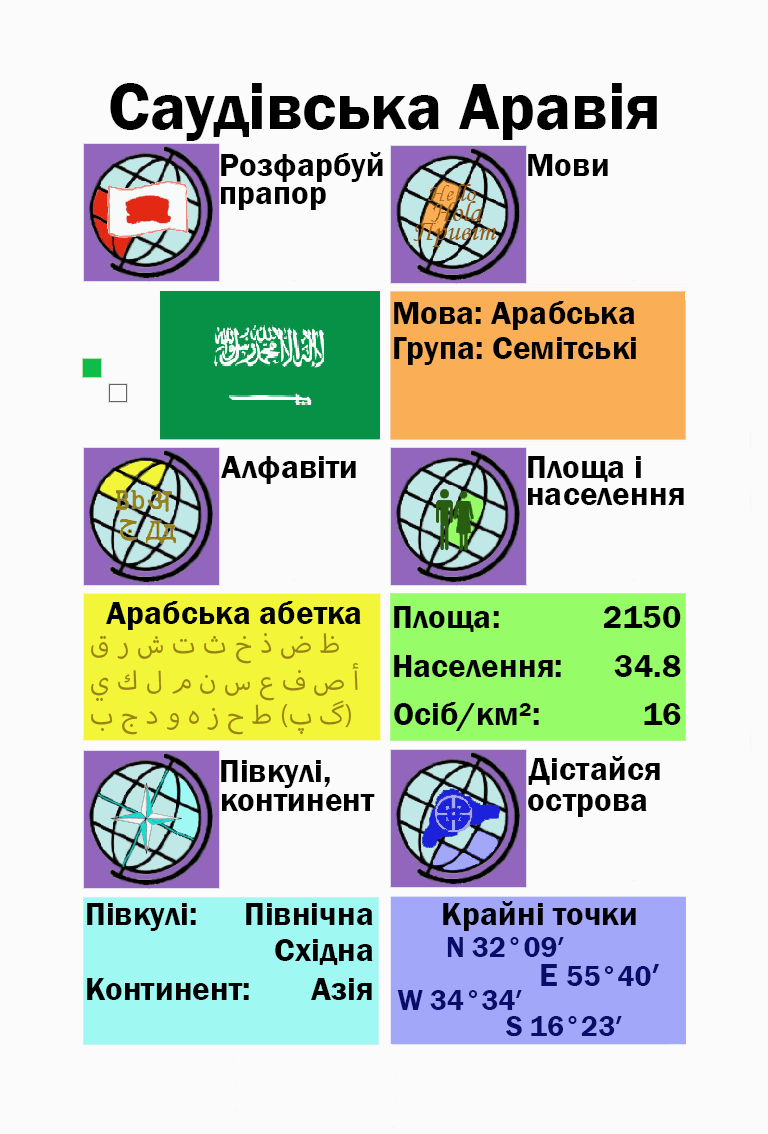
<style>
.page{position:relative;width:768px;height:1134px;background:#fbfbfb}
.page>*{position:absolute;margin:0}
.t1{font:66.7px "FranklinGothic-Demi";color:#000000}
.t2{font:33.3px "FranklinGothic-Demi";color:#000000}
.t3{font:33.3px "FranklinGothic-Demi";color:#000003}
.t4{font:37.5px "MyriadArabic-Regular";color:#988413}
.t5{font:29.2px "FranklinGothic-Demi";color:#988413}
.t6{font:29.2px "FranklinGothic-Demi";color:#090c69}
.t7{font:33.3px "FranklinGothic-Demi";color:#090c69}
</style>
<div class="page">
<p class="t1" style="left:110px;top:83px;width:547px;height:58px">Саудівська Аравія</p>
<p class="t2" style="left:221px;top:152px;width:162px;height:30px">Розфарбуй</p>
<p class="t2" style="left:528px;top:154px;width:80px;height:22px">Мови</p>
<p class="t2" style="left:221px;top:187px;width:105px;height:23px">прапор</p>
<p class="t2" style="left:394px;top:301px;width:241px;height:29px">Мова: Арабська</p>
<p class="t2" style="left:394px;top:337px;width:242px;height:28px">Група: Семітські</p>
<p class="t2" style="left:221px;top:456px;width:135px;height:28px">Алфавіти</p>
<p class="t2" style="left:528px;top:456px;width:113px;height:26px">Площа і</p>
<p class="t2" style="left:528px;top:488px;width:156px;height:17px">населення</p>
<p class="t2" style="left:106px;top:601px;width:255px;height:29px">Арабська абетка</p>
<p class="t2" style="left:394px;top:606px;width:105px;height:26px">Площа:</p>
<p class="t3" style="left:604px;top:606px;width:77px;height:22px">2150</p>
<p class="t4" style="left:91px;top:633px;width:248px;height:31px"><span class="t5"><br></span>ق ر ش ت ث خ ذ ض ظ</p>
<p class="t4" style="left:91px;top:663px;width:268px;height:38px">ي ك ل م ن س ع ف ص أ</p>
<p class="t2" style="left:394px;top:655px;width:167px;height:22px">Населення:</p>
<p class="t2" style="left:614px;top:655px;width:67px;height:22px">34.8</p>
<p class="t4" style="left:91px;top:700px;width:260px;height:35px">ب ج د و ه ز ح ط (پ گ)</p>
<p class="t2" style="left:394px;top:702px;width:145px;height:29px">Осіб/км²:</p>
<p class="t2" style="left:644px;top:703px;width:37px;height:22px">16</p>
<p class="t2" style="left:221px;top:760px;width:109px;height:28px">Півкулі,</p>
<p class="t2" style="left:528px;top:756px;width:132px;height:29px">Дістайся</p>
<p class="t2" style="left:222px;top:794px;width:153px;height:17px">континент</p>
<p class="t2" style="left:528px;top:794px;width:119px;height:23px">острова</p>
<p class="t2" style="left:87px;top:903px;width:109px;height:28px">Півкулі:</p>
<p class="t2" style="left:246px;top:903px;width:127px;height:22px">Північна</p>
<p class="t3" style="left:443px;top:901px;width:193px;height:30px">Крайні точки</p>
<p class="t2" style="left:275px;top:939px;width:98px;height:26px">Східна</p>
<p class="t6" style="left:447px;top:937px;width:117px;height:20px">N 32°09′</p>
<p class="t6" style="left:541px;top:964px;width:118px;height:22px"><span class="t7">E </span>55°40<span class="t7">′</span></p>
<p class="t2" style="left:87px;top:978px;width:162px;height:22px">Континент:</p>
<p class="t2" style="left:311px;top:978px;width:61px;height:22px">Азія</p>
<p class="t6" style="left:397px;top:990px;width:125px;height:20px">W 34°34′</p>
<p class="t6" style="left:506px;top:1016px;width:116px;height:21px">S 16°23′</p>
</div>
